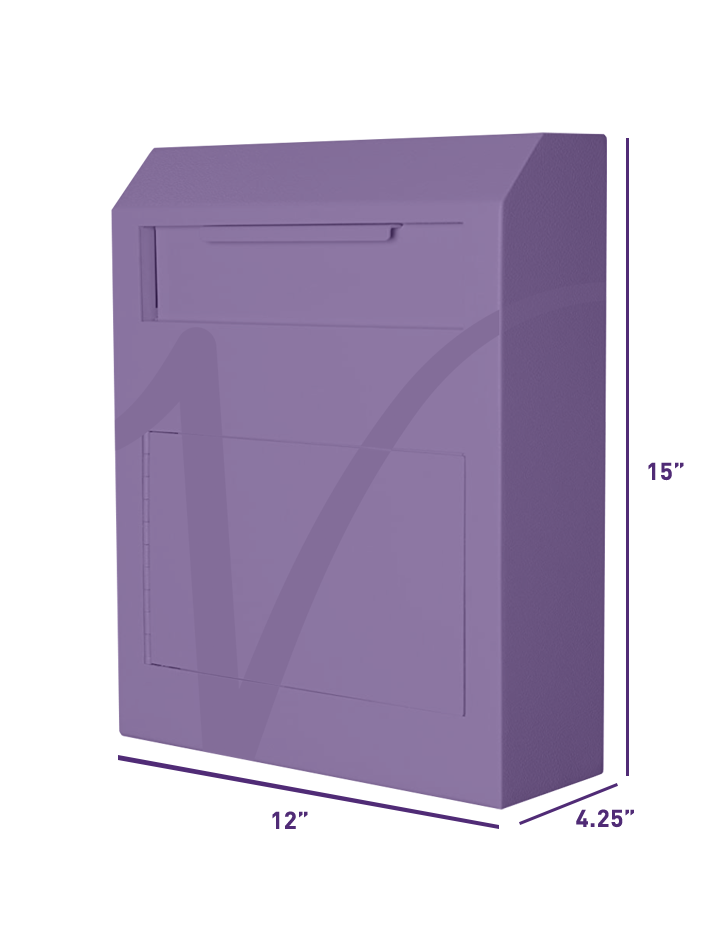
<style>
.page{position:relative;width:718px;height:942px;background:#ffffff}
.page>*{position:absolute;margin:0}
.t1{font:24px "DINPro-Bold";letter-spacing:0.025em;color:#502b76;text-transform:uppercase}
.t2{font:24px "DINPro-Bold";letter-spacing:0.025em;color:#502b76}
</style>
<div class="page">
<p class="t1" style="left:648px;top:462px;width:36px;height:19px">15”</p>
<p class="t2" style="left:576px;top:809px;width:58px;height:19px">4.25<span class="t1">”</span></p>
<p class="t2" style="left:272px;top:811px;width:36px;height:18px">12”</p>
</div>
